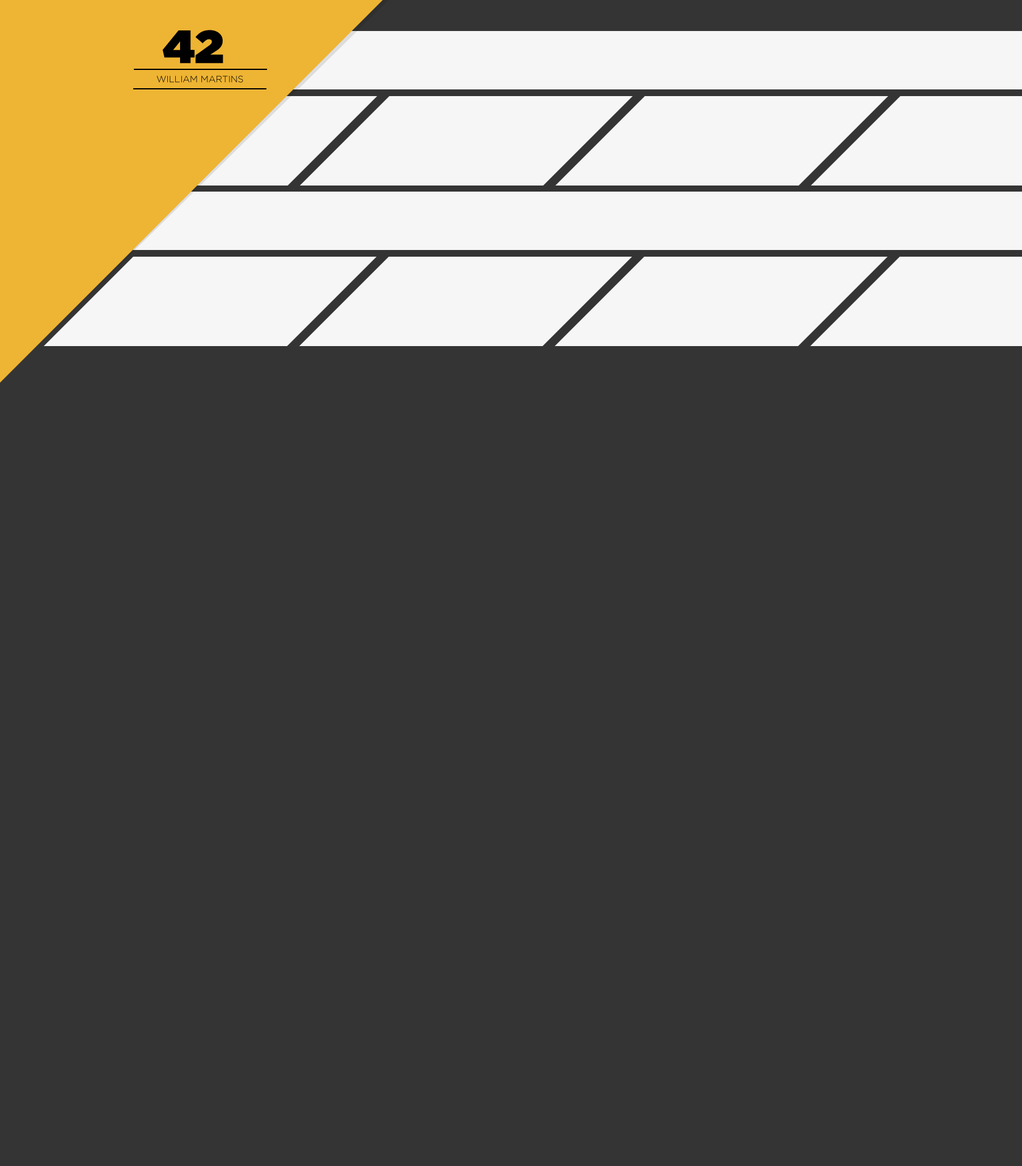
<style>
.page{position:relative;width:1022px;height:1166px;background:#343434}
.page>*{position:absolute;margin:0}
.t1{font:46.4px "Gotham-Ultra";color:#050505}
.t2{font:9.1px "Gotham-Light";text-transform:uppercase}
</style>
<div class="page">
<p class="t1" style="left:162px;top:30px;width:61px;height:33px">42</p>
<p class="t2" style="left:156px;top:75px;width:87px;height:8px">William Martins</p>
</div>
